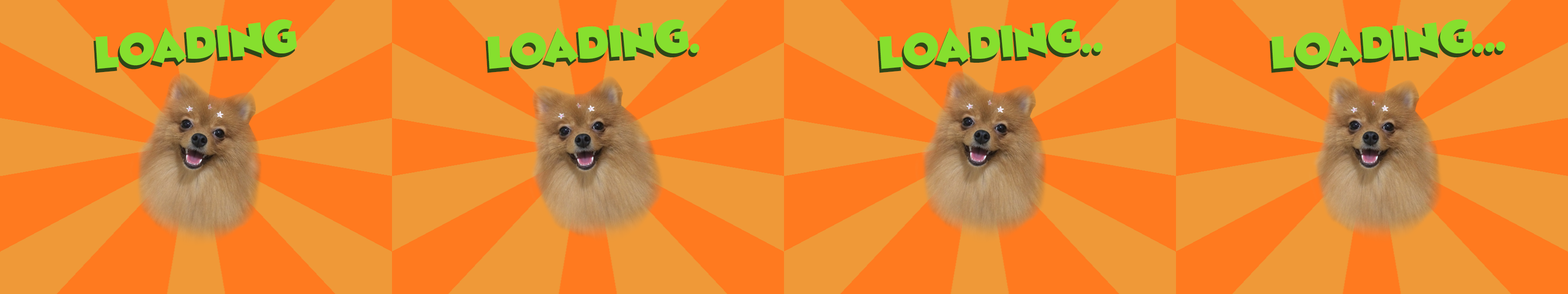
<style>
.page{position:relative;width:1568px;height:294px;background:#ff7a1f}
.page>*{position:absolute;margin:0}
.t1{font:13.8px "WickedMouse";color:#86df2e}
</style>
<div class="page">
<p class="t1" style="left:94px;top:23px;width:201px;height:50px;rotate:-5deg">Loading</p>
<p class="t1" style="left:96px;top:19px;width:201px;height:50px;rotate:-5deg">Loading</p>
<p class="t1" style="left:486px;top:23px;width:212px;height:50px;rotate:-5deg">Loading.</p>
<p class="t1" style="left:488px;top:19px;width:212px;height:50px;rotate:-5deg">Loading.</p>
<p class="t1" style="left:878px;top:23px;width:223px;height:50px;rotate:-5deg">Loading..</p>
<p class="t1" style="left:880px;top:19px;width:223px;height:50px;rotate:-5deg">Loading..</p>
<p class="t1" style="left:1270px;top:23px;width:234px;height:50px;rotate:-5deg">Loading...</p>
<p class="t1" style="left:1272px;top:19px;width:234px;height:50px;rotate:-5deg">Loading...</p>
</div>
